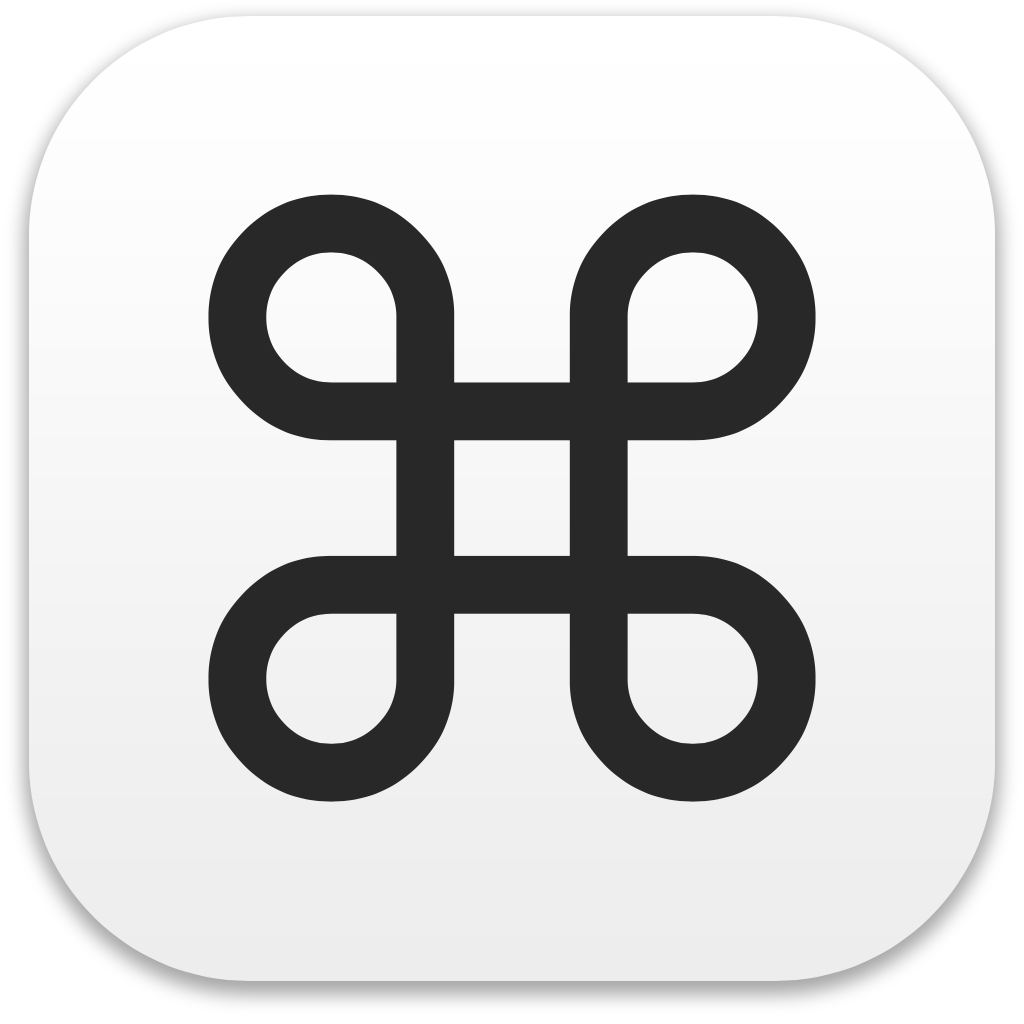
<style>
.page{position:relative;width:1024px;height:1024px}
.page>*{position:absolute;margin:0}
.t1{font:800px "DejaVuSans";color:#282828}
</style>
<div class="page">
<p class="t1" style="left:208px;top:194px;width:608px;height:608px">⌘</p>
</div>
